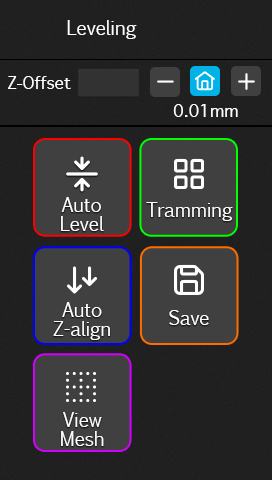
<style>
.page{position:relative;width:272px;height:480px;background:#404040}
.page>*{position:absolute;margin:0}
.t1{font:19px "EuphemiaUCAS";letter-spacing:-0.015em;color:#ffffff}
.t2{font:16px "Geneva";letter-spacing:-0.015em;color:#ffffff}
.t3{font:19px/18.7px "EuphemiaUCAS";letter-spacing:-0.015em;color:#ffffff}
</style>
<div class="page">
<p class="t1" style="left:67px;top:20px;width:70px;height:19px">Leveling</p>
<p class="t2" style="left:8px;top:76px;width:63px;height:13px">Z-Offset</p>
<p class="t2" style="left:173px;top:104px;width:65px;height:13px">0.01mm</p>
<p class="t3" style="left:61px;top:197px;width:43px;height:34px;text-align:center">Auto<br>Level</p>
<p class="t1" style="left:146px;top:202px;width:87px;height:19px">Tramming</p>
<p class="t3" style="left:53px;top:302px;width:57px;height:38px;text-align:center">Auto<br>Z-align</p>
<p class="t1" style="left:169px;top:310px;width:40px;height:15px">Save</p>
<p class="t3" style="left:61px;top:412px;width:43px;height:34px;text-align:center">View<br>Mesh</p>
</div>
